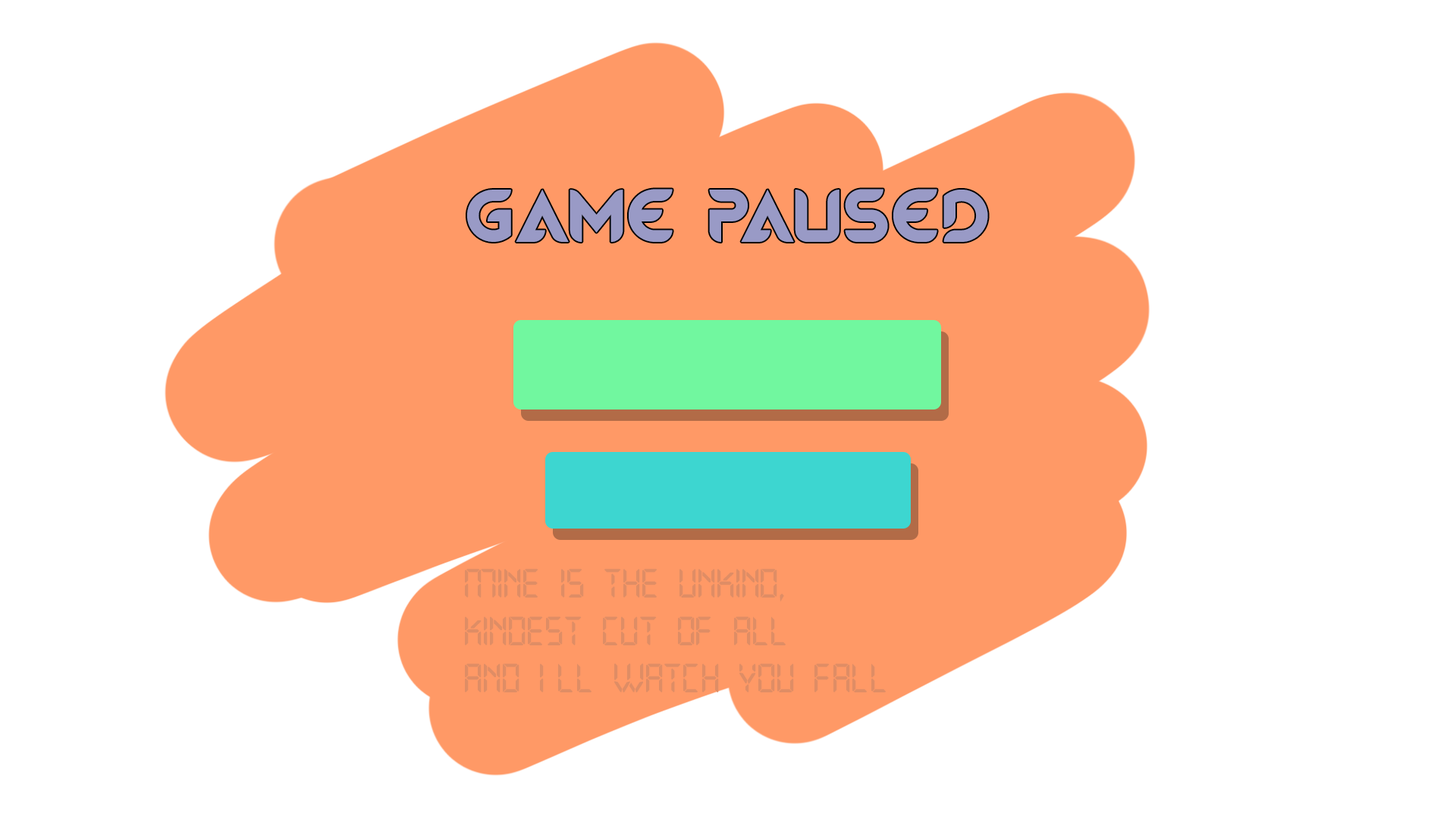
<style>
.page{position:relative;width:1456px;height:819px;background:#ffffff}
.page>*{position:absolute;margin:0}
.t1{font:73px "MagmawaveCaps-Bold";letter-spacing:0.015em;color:#999ac6}
.t2{font:41.1px/47.4px "Open24DisplaySt";letter-spacing:0.015em;color:#df8d65}
</style>
<div class="page">
<p class="t1" style="left:467px;top:189px;width:521px;height:53px">GAME PAUSED</p>
<p class="t2" style="left:465px;top:569px;width:421px;height:123px">Mine is the unkind,<br>kindest cut of all<br>And I’ll watch you fall</p>
</div>
